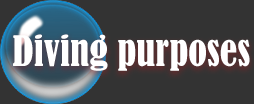
<style>
.page{position:relative;width:254px;height:104px;background:#333333}
.page>*{position:absolute;margin:0}
.t1{font:38.9px "BernardMT-Condensed";color:#ffffff}
</style>
<div class="page">
<p class="t1" style="left:13px;top:34px;width:237px;height:37px">Diving purposes</p>
</div>
